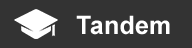
<style>
.page{position:relative;width:192px;height:48px;background:#333333}
.page>*{position:absolute;margin:0}
.t1{font:25.3px "Arial-BoldMT";color:#fefefe}
</style>
<div class="page">
<p class="t1" style="left:76px;top:15px;width:94px;height:20px">Tandem</p>
</div>
